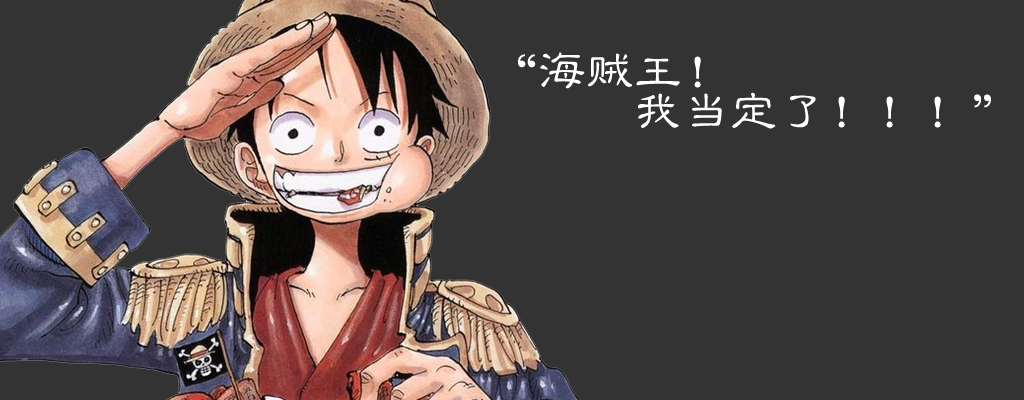
<style>
.page{position:relative;width:1024px;height:400px;background:#333333}
.page>*{position:absolute;margin:0}
.t1{font:48px/40px "GBJenLei-Medium";color:#ffffff}
</style>
<div class="page">
<p class="t1" style="left:518px;top:52px;width:473px;height:77px">“海贼王！<br>    我当定了！！！”</p>
</div>
